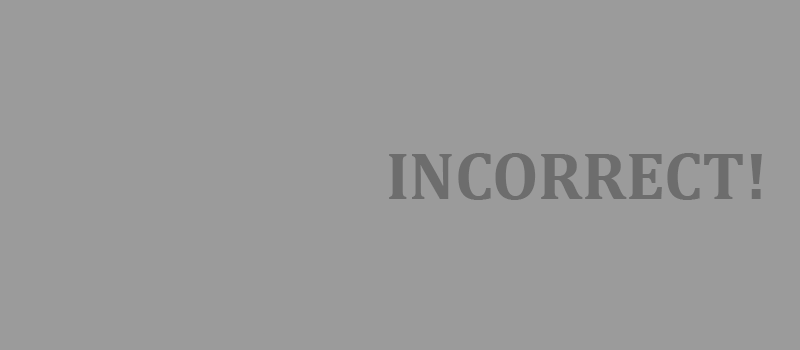
<style>
.page{position:relative;width:800px;height:350px;background:#9b9b9b}
.page>*{position:absolute;margin:0}
.t1{font:66.7px "Cambria-Bold";color:#6d6d6d}
</style>
<div class="page">
<p class="t1" style="left:389px;top:153px;width:373px;height:47px">INCORRECT!</p>
</div>
